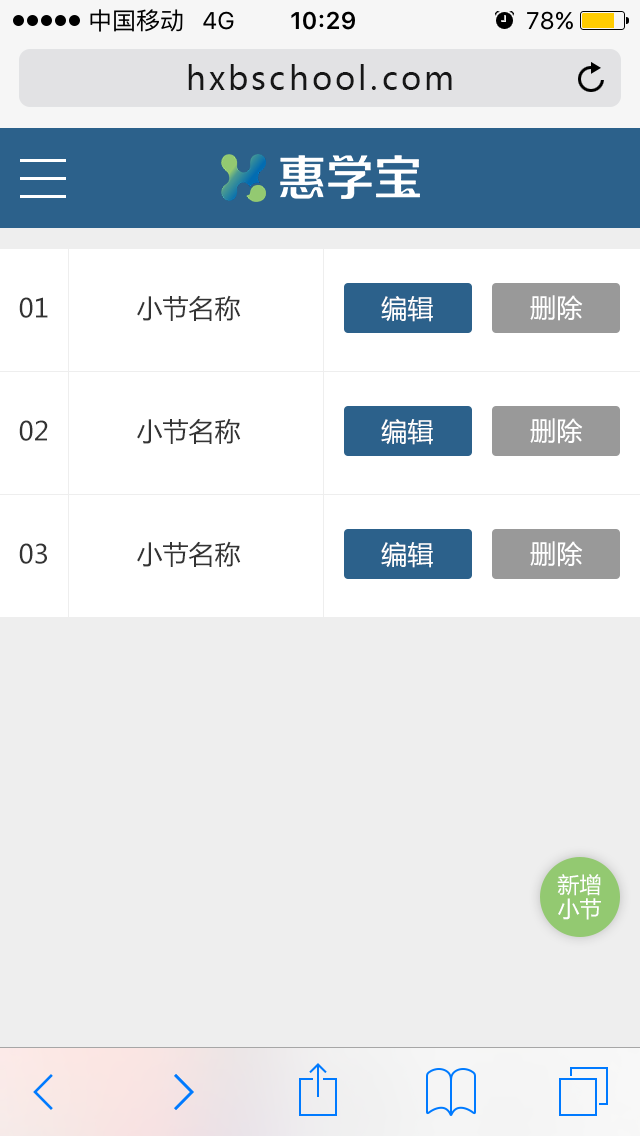
<style>
.page{position:relative;width:640px;height:1136px;background:#eeeeee}
.page>*{position:absolute;margin:0}
.t1{font:32px "MicrosoftYaHei";letter-spacing:0.1em;color:#171717}
.t2{font:26px "MicrosoftYaHei";color:#333333}
.t3{font:26px "MicrosoftYaHei";color:#ffffff}
.t4{font:22px/24px "MicrosoftYaHei";color:#ffffff}
</style>
<div class="page">
<p class="t1" style="left:188px;top:64px;width:264px;height:26px">hxbschool.com</p>
<p class="t2" style="left:19px;top:297px;width:29px;height:21px">01</p>
<p class="t2" style="left:137px;top:295px;width:104px;height:26px">小节名称</p>
<p class="t3" style="left:381px;top:296px;width:52px;height:26px">编辑</p>
<p class="t3" style="left:530px;top:295px;width:53px;height:26px">删除</p>
<p class="t2" style="left:19px;top:420px;width:29px;height:21px">02</p>
<p class="t2" style="left:137px;top:418px;width:104px;height:26px">小节名称</p>
<p class="t3" style="left:381px;top:419px;width:52px;height:26px">编辑</p>
<p class="t3" style="left:530px;top:418px;width:53px;height:26px">删除</p>
<p class="t2" style="left:19px;top:543px;width:28px;height:21px">03</p>
<p class="t2" style="left:137px;top:541px;width:104px;height:26px">小节名称</p>
<p class="t3" style="left:381px;top:542px;width:52px;height:26px">编辑</p>
<p class="t3" style="left:530px;top:541px;width:53px;height:26px">删除</p>
<p class="t4" style="left:557px;top:874px;width:44px;height:46px">新增<br>小节</p>
</div>
